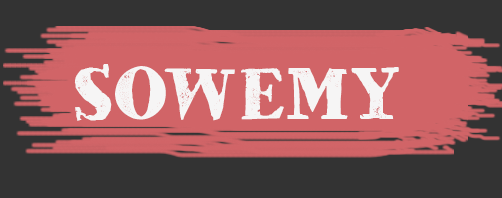
<style>
.page{position:relative;width:502px;height:198px;background:#333333}
.page>*{position:absolute;margin:0}
.t1{font:60px "HVDBodedo-Medium";color:#f6f5f5}
</style>
<div class="page">
<p class="t1" style="left:74px;top:64px;width:325px;height:57px">SOWEMY</p>
</div>
